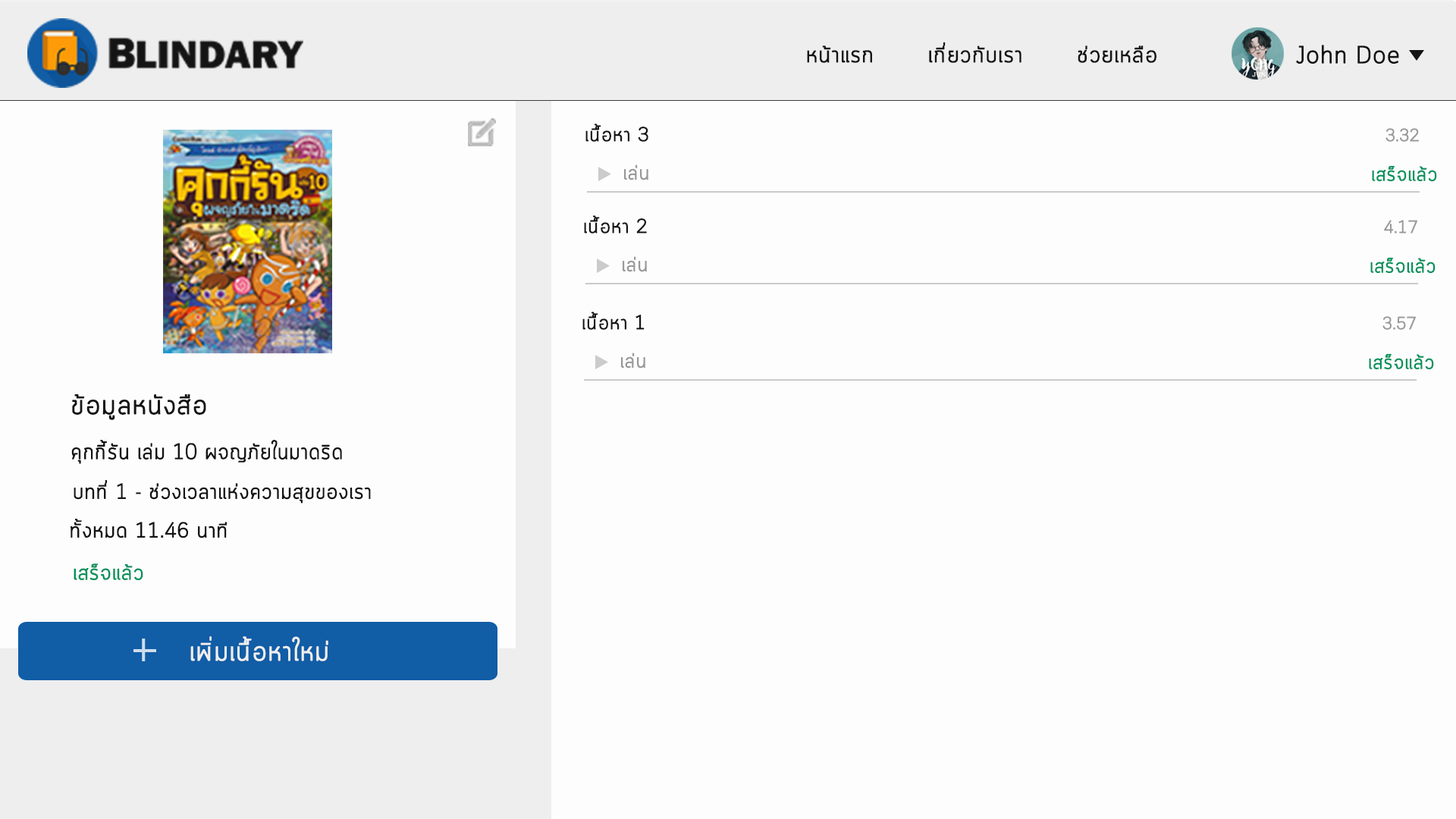
<style>
.page{position:relative;width:1456px;height:819px;background:#fdfdfd}
.page>*{position:absolute;margin:0}
.t1{font:22.7px "Cloud-Light";color:#141414;font-weight:bold}
.t2{font:24.2px "Cloud-Light";color:#141414;font-weight:bold}
.t3{font:19.7px "Cloud-Light";color:#141414;font-weight:bold}
.t4{font:17.4px "Cloud-Light";color:#999999;font-weight:bold}
.t5{font:19.7px "Cloud-Light";color:#999999;font-weight:bold}
.t6{font:19.7px "Cloud-Light";color:#00925b;font-weight:bold}
.t7{font:27.4px "Cloud-Light";color:#141414;font-weight:bold}
.t8{font:22px "Cloud-Light";color:#141414;font-weight:bold;scale:0.95 1}
.t9{font:21.1px "Cloud-Light";color:#141414;font-weight:bold}
.t10{font:21.1px "Cloud-Light";color:#00925b;font-weight:bold}
.t11{font:27.3px "Cloud-Light";color:#efefef;font-weight:bold}
</style>
<div class="page">
<p class="t1" style="left:807px;top:42px;width:349px;height:21px">หน้าแรก       เกี่ยวกับเรา       ช่วยเหลือ</p>
<p class="t2" style="left:1296px;top:45px;width:103px;height:19px">John Doe</p>
<p class="t3" style="left:585px;top:124px;width:63px;height:18px">เนื้อหา 3</p>
<p class="t4" style="left:1385px;top:128px;width:34px;height:14px">3.32</p>
<p class="t5" style="left:624px;top:165px;width:24px;height:15px">เล่น</p>
<p class="t6" style="left:1372px;top:165px;width:65px;height:16px">เสร็จแล้ว</p>
<p class="t3" style="left:584px;top:215px;width:63px;height:19px">เนื้อหา 2</p>
<p class="t4" style="left:1384px;top:220px;width:33px;height:14px">4.17</p>
<p class="t5" style="left:623px;top:256px;width:24px;height:16px">เล่น</p>
<p class="t6" style="left:1370px;top:257px;width:66px;height:16px">เสร็จแล้ว</p>
<p class="t3" style="left:582px;top:312px;width:63px;height:18px">เนื้อหา 1</p>
<p class="t4" style="left:1382px;top:316px;width:34px;height:14px">3.57</p>
<p class="t5" style="left:621px;top:353px;width:24px;height:16px">เล่น</p>
<p class="t6" style="left:1369px;top:353px;width:65px;height:16px">เสร็จแล้ว</p>
<p class="t7" style="left:72px;top:394px;width:134px;height:26px">ข้อมูลหนังสือ</p>
<p class="t8" style="left:71px;top:440px;width:271px;height:24px">คุกกี้รัน เล่ม 10 ผจญภัยในมาดริด</p>
<p class="t9" style="left:74px;top:480px;width:297px;height:24px">บทที่ 1 - ช่วงเวลาแห่งความสุขของเรา</p>
<p class="t9" style="left:71px;top:519px;width:156px;height:19px">ทั้งหมด 11.46 นาที</p>
<p class="t10" style="left:74px;top:563px;width:69px;height:17px">เสร็จแล้ว</p>
<p class="t11" style="left:190px;top:636px;width:138px;height:25px">เพิ่มเนื้อหาใหม่</p>
</div>
